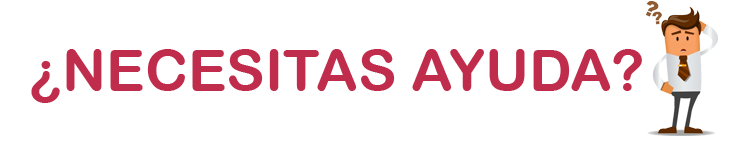
<style>
.page{position:relative;width:750px;height:145px;background:#ffffff}
.page>*{position:absolute;margin:0}
.t1{font:57.9px "ArialRoundedMTBold";color:#c02d4c}
</style>
<div class="page">
<p class="t1" style="left:31px;top:49px;width:611px;height:54px">¿NECESITAS AYUDA?</p>
</div>
